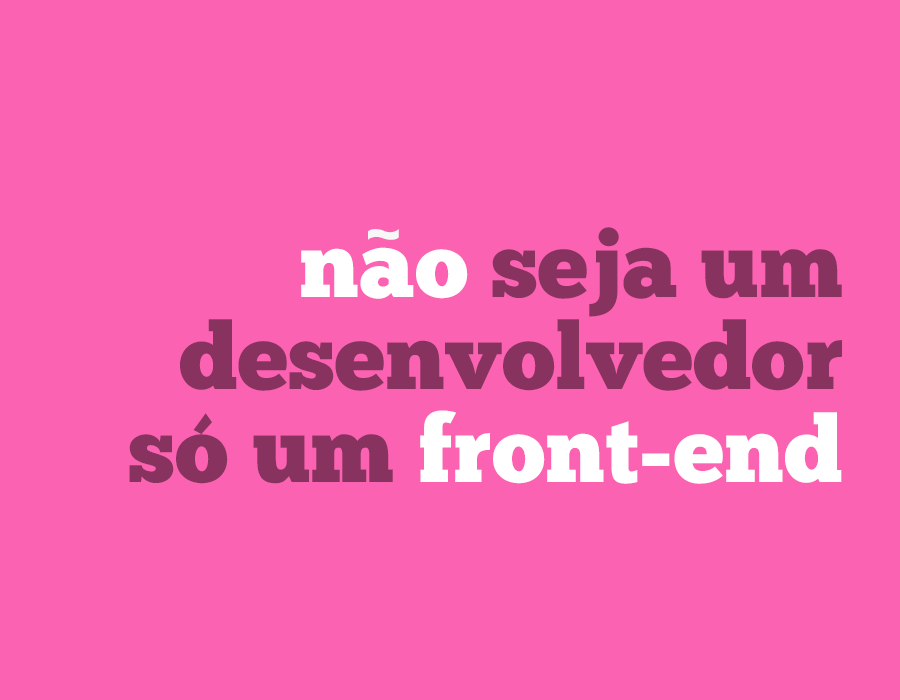
<style>
.page{position:relative;width:900px;height:700px;background:#fc62b2}
.page>*{position:absolute;margin:0}
.t1{font:93.2px/92.6px "ChunkFive-Roman";color:#88335f}
.t2{font:93.2px/92.6px "ChunkFive-Roman";color:#ffffff}
.t3{font:77.1px "ChunkFive-Roman";color:#f7f7f7}
</style>
<div class="page">
<p class="t1" style="left:129px;top:227px;width:713px;height:257px;text-align:right"><span class="t2">nao </span>seja um<br>desenvolvedor<br>só um <span class="t2">front-end</span></p>
<p class="t3" style="left:368px;top:229px;width:31px;height:11px">~</p>
</div>
